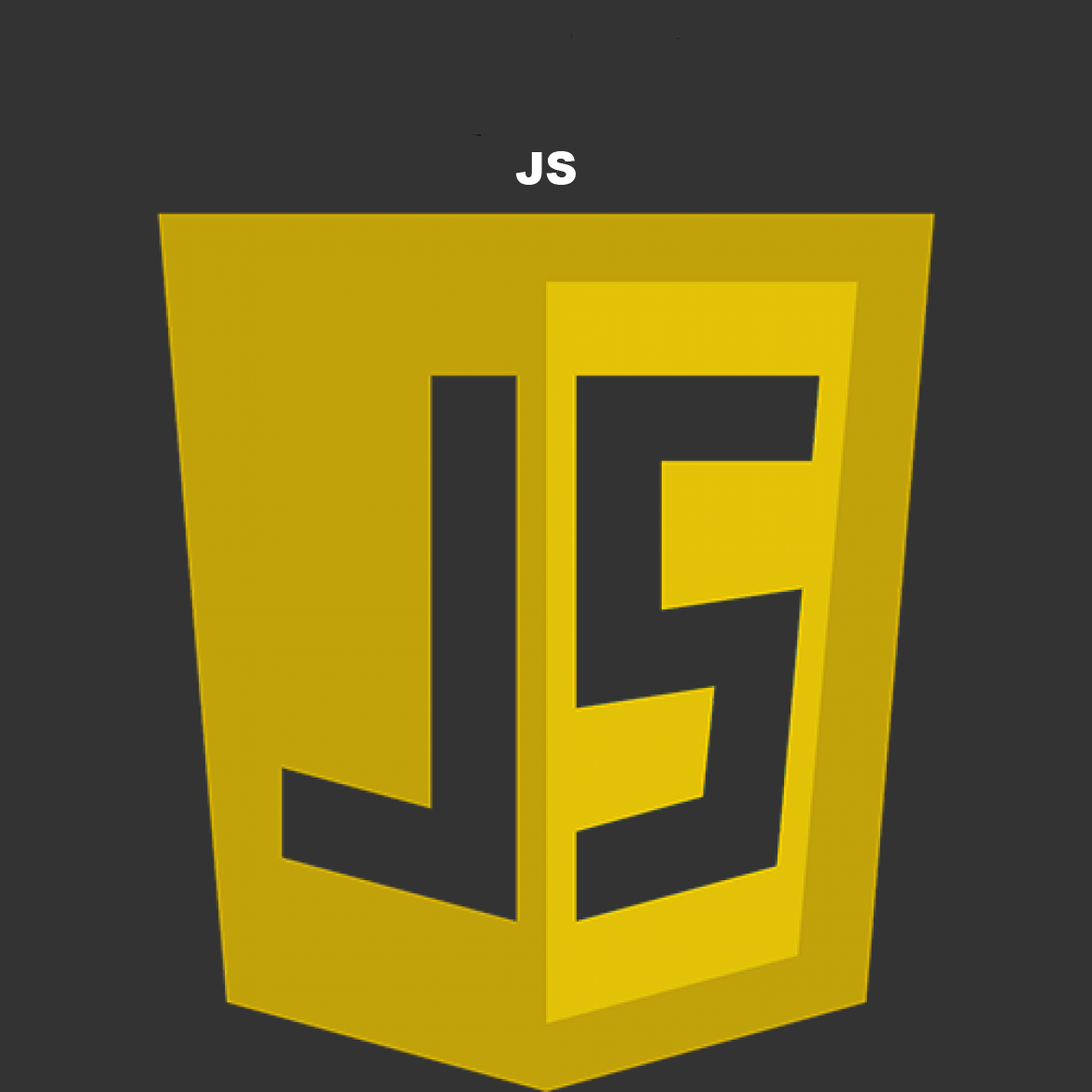
<style>
.page{position:relative;width:1092px;height:1092px;background:#333333}
.page>*{position:absolute;margin:0}
.t1{font:44.8px "Arial-Black";color:#ffffff}
</style>
<div class="page">
<p class="t1" style="left:515px;top:151px;width:61px;height:34px">JS</p>
</div>
